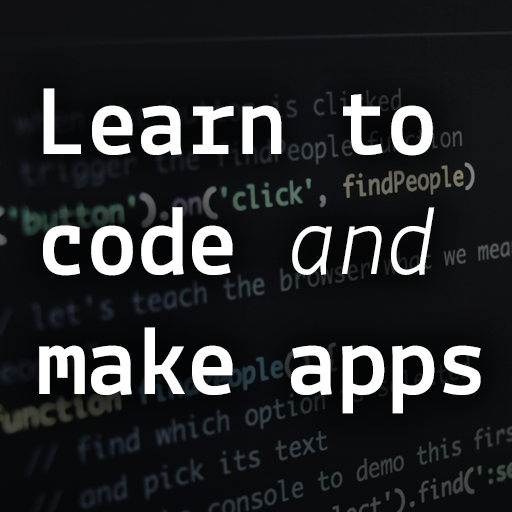
<style>
.page{position:relative;width:512px;height:512px}
.page>*{position:absolute;margin:0}
.t1{font:100px "Lekton-Bold";color:#ffffff}
.t2{font:100px "Lekton-Italic";color:#ffffff}
</style>
<div class="page">
<p class="t1" style="left:39px;top:88px;width:442px;height:326px">Learn to <br>code <span class="t2">and</span> <br>make apps</p>
</div>
